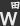
<style>
.page{position:relative;width:20px;height:26px;background:#333333}
.page>*{position:absolute;margin:0}
.t1{font:12px "DFKaiShu-SB-Estd-BF";color:#ececec;font-weight:bold}
.t2{font:18px "ArialMT";color:#ececec;font-weight:bold}
</style>
<div class="page">
<p class="t1" style="left:10px;top:1px;width:10px;height:8px">田</p>
<p class="t2" style="left:0px;top:12px;width:18px;height:14px">W</p>
</div>
